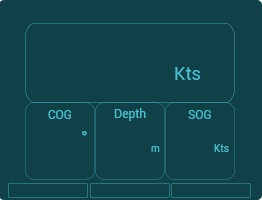
<style>
.page{position:relative;width:262px;height:200px;background:#114148}
.page>*{position:absolute;margin:0}
.t1{font:18px "Roboto-Regular";color:#47c1cf}
.t2{font:12px "Roboto-Regular";color:#47c1cf}
.t3{font:10px "Roboto-Regular";color:#47c1cf}
</style>
<div class="page">
<p class="t1" style="left:175px;top:67px;width:26px;height:13px">Kts</p>
<p class="t2" style="left:48px;top:110px;width:23px;height:9px">COG</p>
<p class="t2" style="left:114px;top:108px;width:32px;height:13px">Depth</p>
<p class="t2" style="left:188px;top:110px;width:23px;height:9px">SOG</p>
<p class="t1" style="left:82px;top:131px;width:5px;height:5px">°</p>
<p class="t3" style="left:151px;top:146px;width:9px;height:6px">m</p>
<p class="t3" style="left:214px;top:144px;width:15px;height:8px">Kts</p>
</div>
